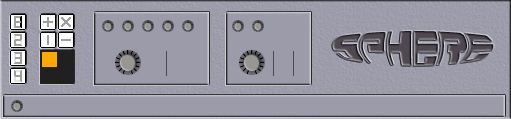
<style>
.page{position:relative;width:511px;height:119px;background:#9b9ba9}
.page>*{position:absolute;margin:0}
.t1{font:40px "Drosselmeyer";color:#4f484f}
</style>
<div class="page">
<p class="t1" style="left:332px;top:31px;width:162px;height:35px">SPHERE</p>
</div>
